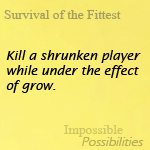
<style>
.page{position:relative;width:150px;height:150px}
.page>*{position:absolute;margin:0}
.t1{font:20px "MicrosoftHimalaya";color:#a49d63}
.t2{font:12.5px "LucidaSans-Italic";color:#000000}
</style>
<div class="page">
<p class="t1" style="left:4px;top:10px;width:117px;height:9px">Survival of the Fittest</p>
<p class="t2" style="left:6px;top:50px;width:135px;height:43px">Kill a shrunken player while under the effect of grow.</p>
</div>
